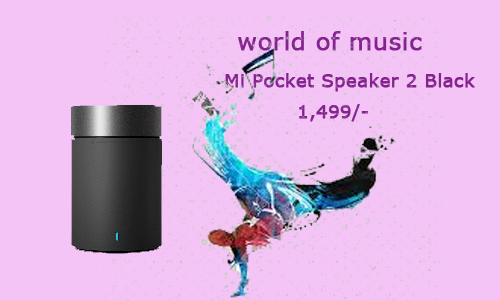
<style>
.page{position:relative;width:500px;height:300px;background:#f5c4f6}
.page>*{position:absolute;margin:0}
.t1{font:24px "Verdana";color:#84238f;font-weight:bold}
.t2{font:18px "Verdana";color:#84238f;font-weight:bold}
</style>
<div class="page">
<p class="t1" style="left:238px;top:31px;width:184px;height:20px">world of music</p>
<p class="t2" style="left:225px;top:73px;width:250px;height:19px">Mi Pocket Speaker 2 Black</p>
<p class="t2" style="left:299px;top:104px;width:69px;height:18px">1,499/-</p>
</div>
